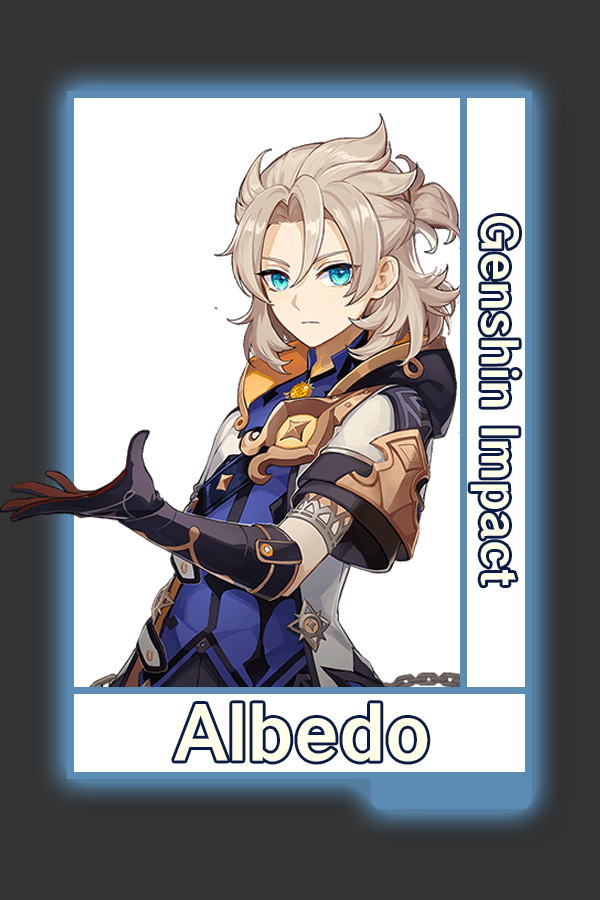
<style>
.page{position:relative;width:600px;height:900px;background:#ffffff}
.page>*{position:absolute;margin:0}
.t1{font:48.8px "HYWenHei-HEW";color:#fefef4}
.t2{font:75px "HYWenHei-HEW";color:#fefef4}
</style>
<div class="page">
<p class="t1" style="left:470px;top:216px;width:50px;height:370px;rotate:90deg">Genshin Impact</p>
<p class="t2" style="left:174px;top:703px;width:254px;height:59px">Albedo</p>
</div>
